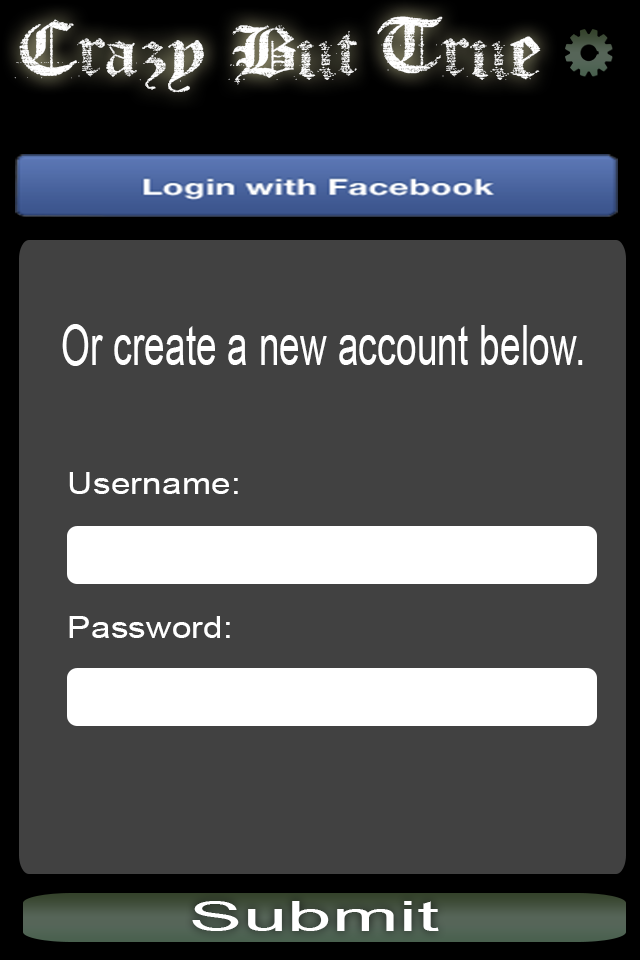
<style>
.page{position:relative;width:640px;height:960px;background:#414141}
.page>*{position:absolute;margin:0}
.t1{font:72px "Faith-Collapsing";color:#ffffff;scale:1.18 1}
.t2{font:55px "ArialMT";color:#ffffff;scale:0.68 1}
.t3{font:40.6px "ArialMT";color:#ffffff;scale:1.98 1}
</style>
<div class="page">
<p class="t1" style="left:14px;top:16px;width:527px;height:77px">Crazy But True</p>
<p class="t2" style="left:62px;top:324px;width:521px;height:42px">Or create a new account below.</p>
<p class="t3" style="left:192px;top:901px;width:247px;height:30px">Submit</p>
</div>
